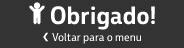
<style>
.page{position:relative;width:184px;height:48px;background:#333333}
.page>*{position:absolute;margin:0}
.t1{font:24px "PetrobrasSans-Bold";color:#ffffff}
.t2{font:11px "PetrobrasSans-Regular";color:#ffffff}
.t3{font:24px "PetrobrasSans-Regular";color:#ffffff}
</style>
<div class="page">
<p class="t1" style="left:51px;top:6px;width:104px;height:24px">Obrigado!</p>
<p class="t2" style="left:43px;top:32px;width:98px;height:12px"><span class="t3">‹</span> Voltar para o menu</p>
</div>
